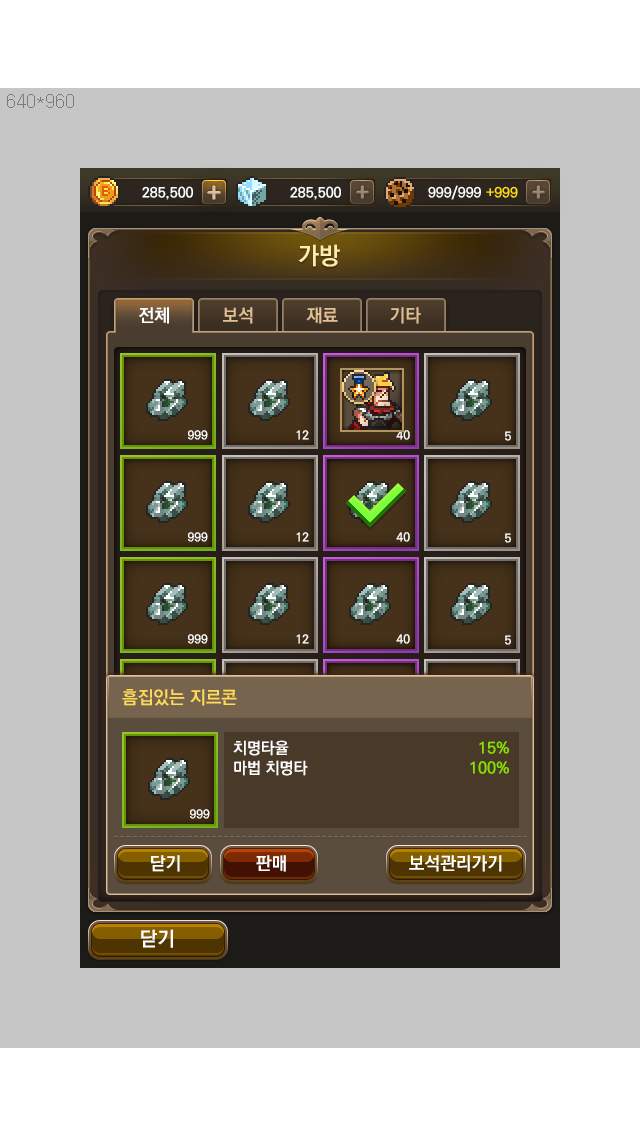
<style>
.page{position:relative;width:640px;height:1136px;background:#c6c6c6}
.page>*{position:absolute;margin:0}
.t1{font:24px "KoPubDotumBold";color:#ffedab}
.t2{font:18px "KoPubDotumBold";color:#ffffff}
.t3{font:18px "KoPubDotumBold";color:#e0c093}
.t4{font:12px "KoPubDotumBold";color:#ffffff}
.t5{font:18px "KoPubDotumBold";color:#ffda58}
.t6{font:16px "KoPubDotumBold";color:#ffffff}
.t7{font:16px "KoPubDotumBold";color:#8ae001}
.t8{font:20px "KoPubDotumBold";color:#ffffff}
</style>
<div class="page">
<p class="t1" style="left:298px;top:244px;width:42px;height:23px">가방</p>
<p class="t2" style="left:139px;top:307px;width:30px;height:17px">전체</p>
<p class="t3" style="left:223px;top:307px;width:30px;height:17px">보석</p>
<p class="t3" style="left:306px;top:307px;width:32px;height:17px">재료</p>
<p class="t3" style="left:390px;top:307px;width:31px;height:17px">기타</p>
<p class="t4" style="left:188px;top:430px;width:20px;height:10px">999</p>
<p class="t4" style="left:296px;top:430px;width:13px;height:10px">12</p>
<p class="t5" style="left:122px;top:689px;width:115px;height:17px">흠집있는 지르콘</p>
<p class="t6" style="left:233px;top:740px;width:75px;height:36px">치명타율<br>마법 치명타</p>
<p class="t7" style="left:470px;top:741px;width:39px;height:33px;text-align:right">15%<br>100%</p>
<p class="t4" style="left:190px;top:809px;width:20px;height:10px">999</p>
<p class="t2" style="left:151px;top:855px;width:29px;height:17px">닫기</p>
<p class="t2" style="left:256px;top:855px;width:30px;height:17px">판매</p>
<p class="t2" style="left:409px;top:855px;width:93px;height:17px">보석관리가기</p>
<p class="t8" style="left:141px;top:929px;width:32px;height:19px">닫기</p>
</div>
